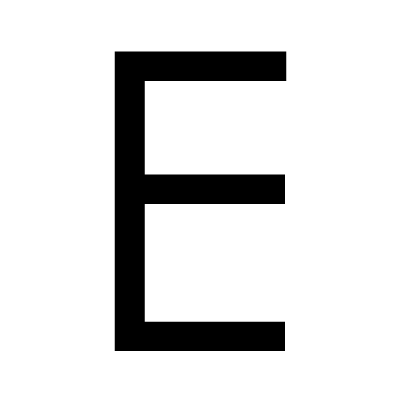
<style>
.page{position:relative;width:400px;height:400px;background:#ffffff}
.page>*{position:absolute;margin:0}
.t1{font:416.7px "CenturyGothic";color:#000000}
</style>
<div class="page">
<p class="t1" style="left:114px;top:51px;width:173px;height:300px">E</p>
</div>
